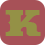
<style>
.page{position:relative;width:45px;height:45px;background:#a75157}
.page>*{position:absolute;margin:0}
.t1{font:50px "Saddlebag-Black";color:#949146}
</style>
<div class="page">
<p class="t1" style="left:5px;top:10px;width:36px;height:26px">K</p>
</div>
